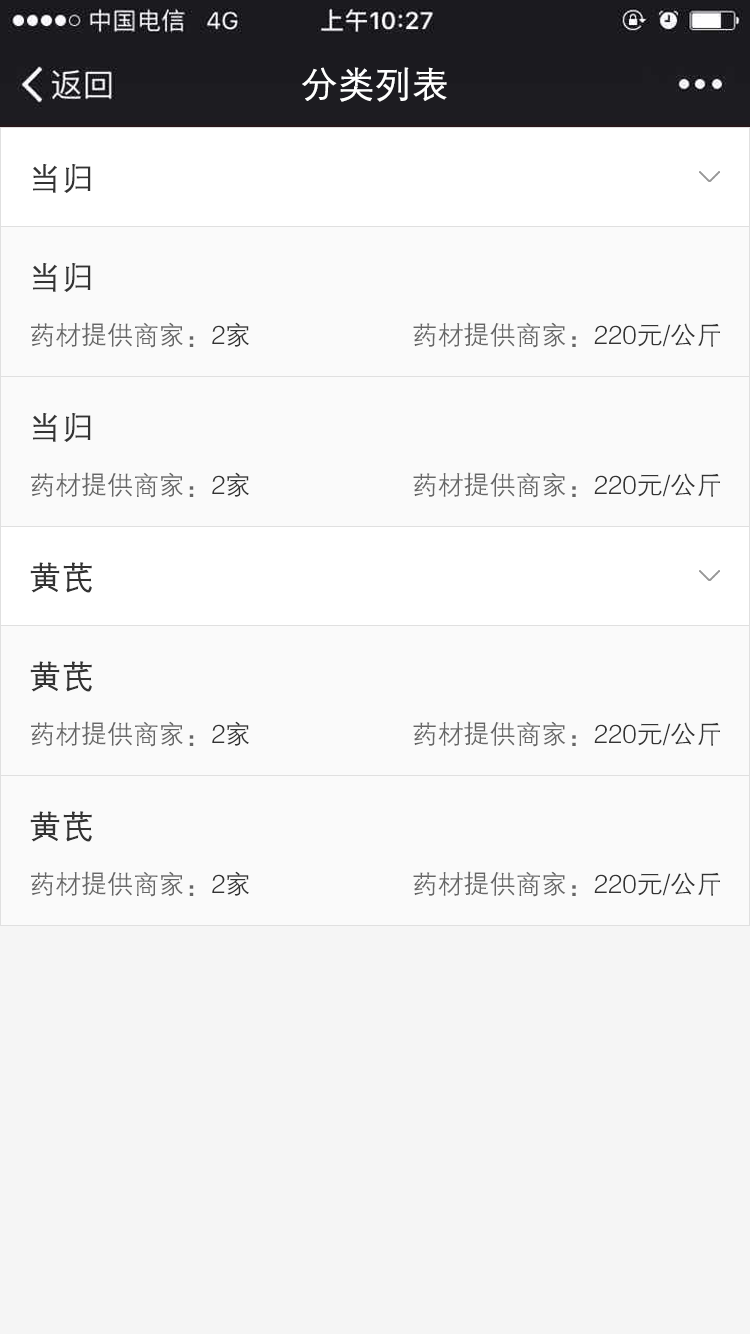
<style>
.page{position:relative;width:750px;height:1334px;background:#fafafa}
.page>*{position:absolute;margin:0}
.t1{font:36px "FZZDXJW--GB1-0";color:#ffffff;font-weight:bold}
.t2{font:32px "FZZDXJW--GB1-0";color:#333333;font-weight:bold}
.t3{font:26px "FZZDXJW--GB1-0";color:#666666}
.t4{font:26px "FZZDXJW--GB1-0";color:#333333}
</style>
<div class="page">
<p class="t1" style="left:302px;top:67px;width:145px;height:35px">分类列表</p>
<p class="t2" style="left:33px;top:164px;width:58px;height:29px">当归</p>
<p class="t2" style="left:33px;top:263px;width:58px;height:29px">当归</p>
<p class="t3" style="left:31px;top:322px;width:218px;height:26px">药材提供商家：<span class="t4">2家</span></p>
<p class="t3" style="left:413px;top:322px;width:307px;height:26px">药材提供商家：<span class="t4">220元/公斤</span></p>
<p class="t2" style="left:33px;top:413px;width:58px;height:29px">当归</p>
<p class="t3" style="left:31px;top:472px;width:218px;height:26px">药材提供商家：<span class="t4">2家</span></p>
<p class="t3" style="left:413px;top:472px;width:307px;height:26px">药材提供商家：<span class="t4">220元/公斤</span></p>
<p class="t2" style="left:30px;top:562px;width:62px;height:31px">黄芪</p>
<p class="t2" style="left:30px;top:661px;width:62px;height:31px">黄芪</p>
<p class="t3" style="left:31px;top:721px;width:218px;height:26px">药材提供商家：<span class="t4">2家</span></p>
<p class="t3" style="left:413px;top:721px;width:307px;height:26px">药材提供商家：<span class="t4">220元/公斤</span></p>
<p class="t2" style="left:30px;top:811px;width:62px;height:31px">黄芪</p>
<p class="t3" style="left:31px;top:871px;width:218px;height:26px">药材提供商家：<span class="t4">2家</span></p>
<p class="t3" style="left:413px;top:871px;width:307px;height:26px">药材提供商家：<span class="t4">220元/公斤</span></p>
</div>
